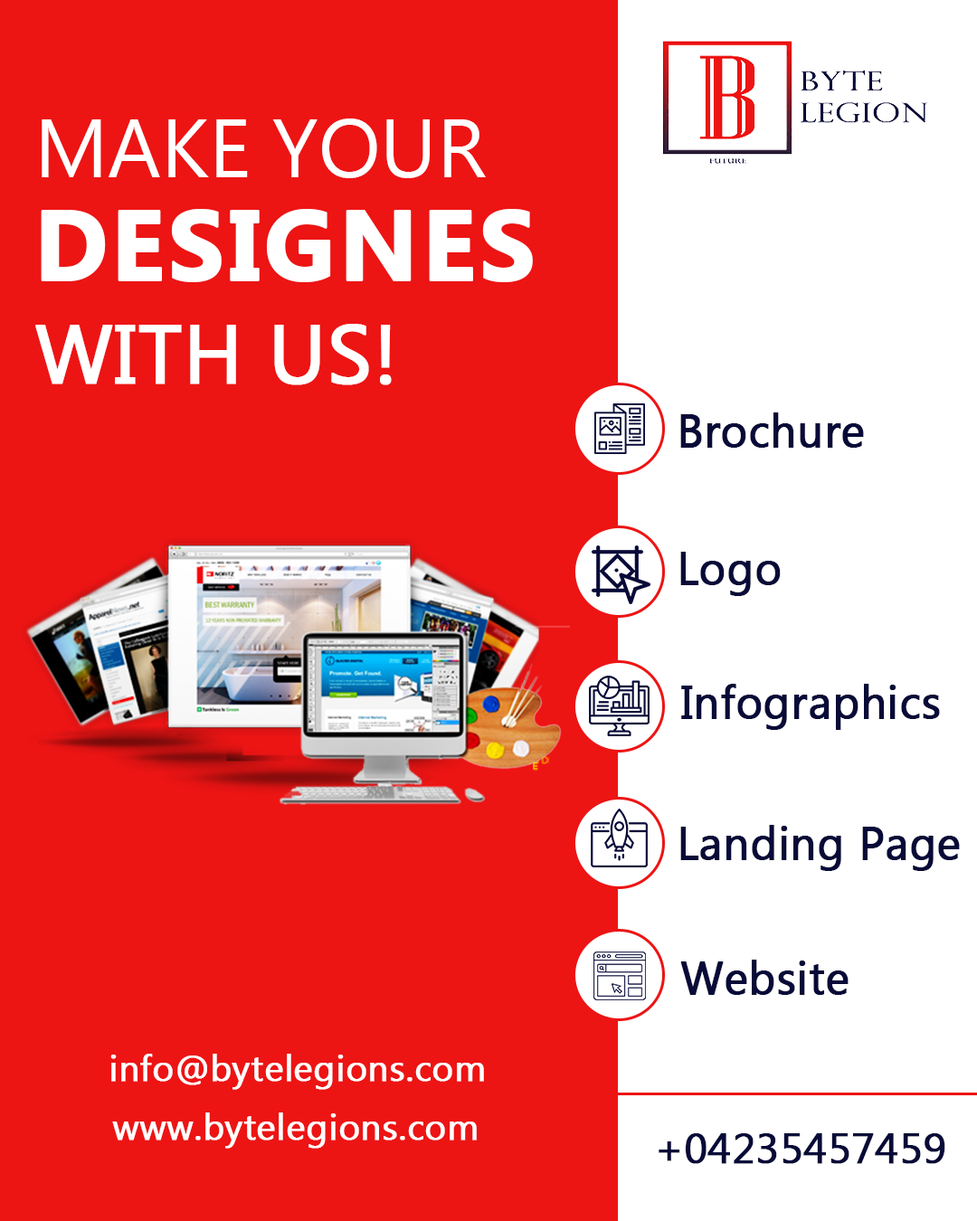
<style>
.page{position:relative;width:977px;height:1221px;background:#ed1414}
.page>*{position:absolute;margin:0}
.t1{font:82.2px/111.1px "MyanmarText";color:#ffffff;text-transform:uppercase}
.t2{font:99.5px/102.6px "MyanmarText-Bold";letter-spacing:0.015em;color:#ffffff;text-transform:uppercase;font-weight:bold}
.t3{font:82.2px/102.6px "MyanmarText";color:#ffffff;text-transform:uppercase;font-weight:bold}
.t4{font:45.2px "MyanmarText";color:#080a38;font-weight:bold}
.t5{font:36.2px "MyanmarText";color:#ffffff;font-weight:bold}
.t6{font:42.2px "MyanmarText";color:#080a38;font-weight:bold}
</style>
<div class="page">
<p class="t1" style="left:35px;top:118px;width:498px;height:267px">Make your<br><span class="t2">designes<br></span><span class="t3">with us!</span></p>
<p class="t4" style="left:680px;top:412px;width:184px;height:36px">Brochure</p>
<p class="t4" style="left:680px;top:552px;width:100px;height:44px">Logo</p>
<p class="t4" style="left:681px;top:684px;width:259px;height:46px">Infographics</p>
<p class="t4" style="left:680px;top:825px;width:280px;height:46px">Landing Page</p>
<p class="t4" style="left:680px;top:960px;width:168px;height:35px">Website</p>
<p class="t5" style="left:110px;top:1054px;width:374px;height:36px">info@bytelegions.com</p>
<p class="t5" style="left:112px;top:1112px;width:365px;height:37px">www.bytelegions.com</p>
<p class="t6" style="left:658px;top:1133px;width:287px;height:31px">+04235457459</p>
</div>
